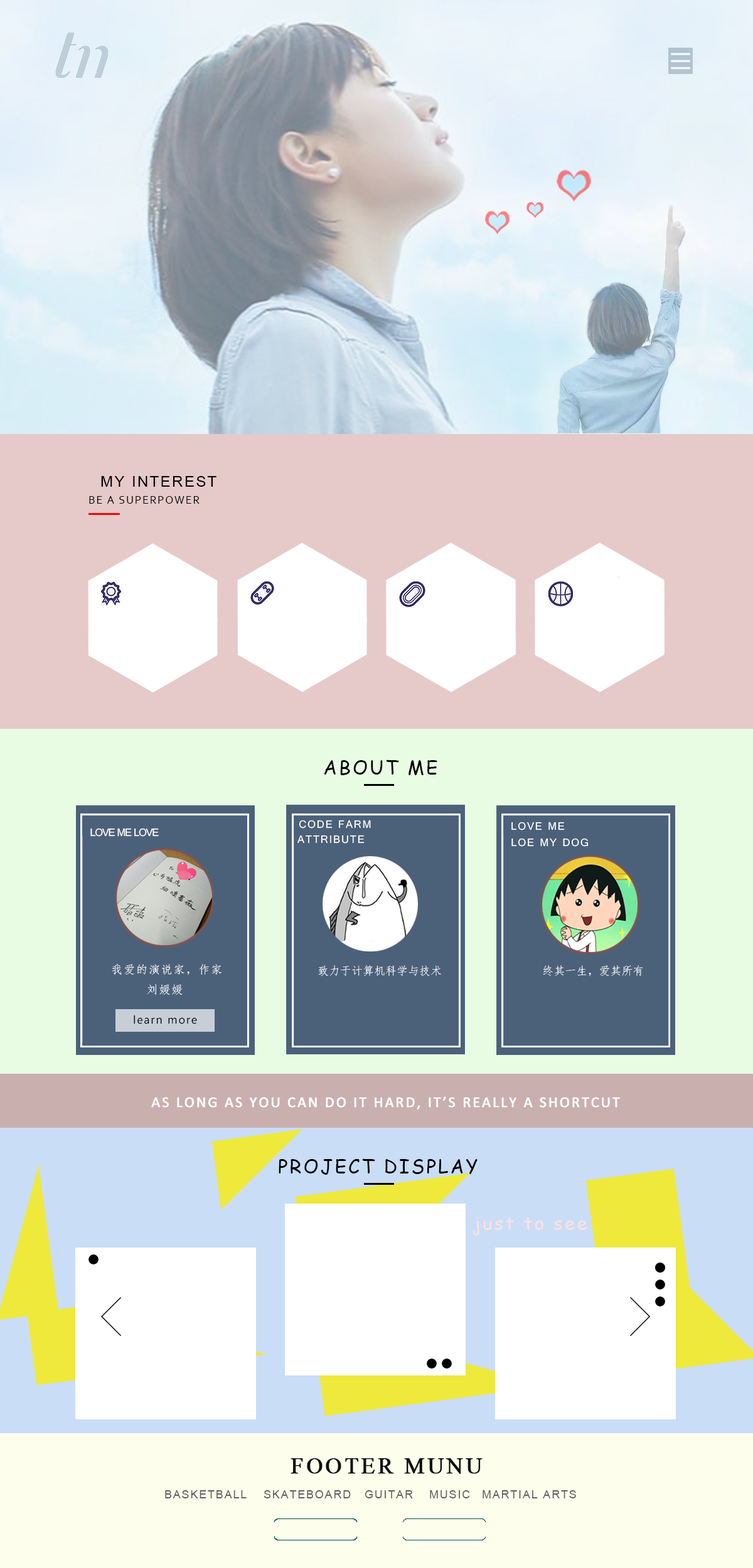
<style>
.page{position:relative;width:753px;height:1568px}
.page>*{position:absolute;margin:0}
.t1{font:15.1px "ArialMT";letter-spacing:0.1em;color:#000000}
.t2{font:11.3px "Corbel";letter-spacing:0.1em;color:#000000}
.t3{font:18.8px "ComicSansMS";letter-spacing:0.1em;color:#000000}
.t4{font:11.3px "Gautami";letter-spacing:0.1em;color:#ffffff}
.t5{font:11.3px "Gautami";letter-spacing:-0.075em;color:#ffffff}
.t6{font:11.3px "·ÂËÎ";letter-spacing:0.1em;color:#ffffff}
.t7{font:11.3px "·ÂËÎ";color:#ffffff}
.t8{font:11.3px "LaoUI";letter-spacing:0.1em;color:#000e1e}
.t9{font:15px "Calibri";letter-spacing:0.1em;color:#ffffff;font-weight:bold}
.t10{font:18.8px "ComicSansMS";letter-spacing:0.1em;color:#ffe0e0}
.t11{font:22.6px "TimesNewRomanPSMT";letter-spacing:0.1em;color:#0c0f0e;font-weight:bold}
.t12{font:11.3px "ArialMT";letter-spacing:0.1em;color:#626262}
</style>
<div class="page">
<p class="t1" style="left:101px;top:476px;width:115px;height:11px">MY INTEREST</p>
<p class="t2" style="left:89px;top:496px;width:110px;height:8px">BE A SUPERPOWER</p>
<p class="t3" style="left:324px;top:760px;width:113px;height:15px">ABOUT ME</p>
<p class="t4" style="left:299px;top:820px;width:72px;height:9px">CODE FARM</p>
<p class="t4" style="left:511px;top:822px;width:53px;height:8px">LOVE ME</p>
<p class="t5" style="left:90px;top:828px;width:69px;height:9px">LOVE ME LOVE</p>
<p class="t4" style="left:297px;top:835px;width:67px;height:9px">ATTRIBUTE</p>
<p class="t4" style="left:511px;top:838px;width:77px;height:9px">LOE MY DOG</p>
<p class="t6" style="left:112px;top:964px;width:110px;height:11px">我爱的演说家，作家</p>
<p class="t7" style="left:318px;top:965px;width:123px;height:11px">致力于计算机科学与技术</p>
<p class="t7" style="left:543px;top:965px;width:100px;height:11px">终其一生，爱其所有</p>
<p class="t6" style="left:147px;top:984px;width:36px;height:11px">刘媛媛</p>
<p class="t8" style="left:134px;top:1015px;width:63px;height:9px">learn more</p>
<p class="t9" style="left:151px;top:1096px;width:469px;height:14px">AS LONG AS YOU CAN DO IT HARD, IT’S REALLY A SHORTCUT</p>
<p class="t3" style="left:278px;top:1158px;width:199px;height:17px">PROJECT DISPLAY</p>
<p class="t10" style="left:472px;top:1217px;width:115px;height:19px">just to see</p>
<p class="t11" style="left:290px;top:1458px;width:192px;height:16px">FOOTER MUNU</p>
<p class="t12" style="left:165px;top:1490px;width:81px;height:8px">BASKETBALL</p>
<p class="t12" style="left:263px;top:1490px;width:88px;height:8px">SKATEBOARD</p>
<p class="t12" style="left:364px;top:1490px;width:49px;height:8px">GUITAR</p>
<p class="t12" style="left:430px;top:1490px;width:40px;height:8px">MUSIC</p>
<p class="t12" style="left:482px;top:1490px;width:94px;height:8px">MARTIAL ARTS</p>
</div>
